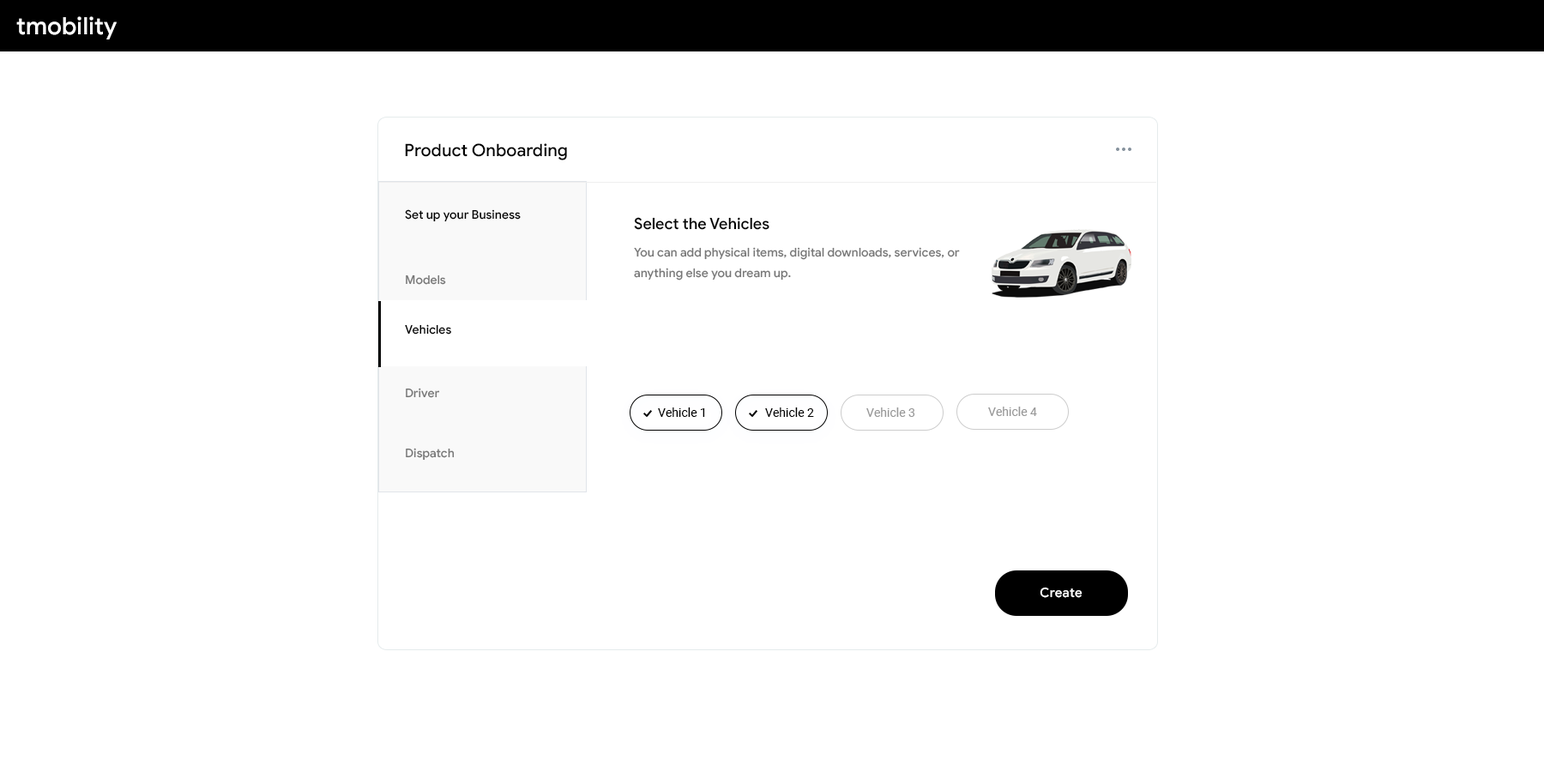
<style>
.page{position:relative;width:1544px;height:772px;background:#ffffff}
.page>*{position:absolute;margin:0}
.t1{font:24px "GoogleSans-Medium";color:#ffffff}
.t2{font:17.2px "GoogleSans-Medium";color:#000000}
.t3{font:12px "GoogleSans-Medium";color:#000000}
.t4{font:15.4px "GoogleSans-Medium";color:#000000}
.t5{font:12px/20.6px "GoogleSans-Medium";color:#777777}
.t6{font:12px "GoogleSans-Medium";color:#777777}
.t7{font:12px "Roboto-Regular";color:#000000}
.t8{font:12px "Roboto-Regular";color:#999999}
.t9{font:12.9px "GoogleSans-Medium";letter-spacing:0.01em;color:#ffffff}
</style>
<div class="page">
<p class="t1" style="left:16px;top:16px;width:101px;height:23px">tmobility</p>
<p class="t2" style="left:405px;top:143px;width:162px;height:17px">Product Onboarding</p>
<p class="t3" style="left:405px;top:209px;width:116px;height:13px">Set up your Business</p>
<p class="t4" style="left:634px;top:217px;width:136px;height:13px">Select the Vehicles</p>
<p class="t5" style="left:634px;top:247px;width:326px;height:34px">You can add physical items, digital downloads, services, or anything else you dream up.</p>
<p class="t6" style="left:406px;top:275px;width:40px;height:10px">Models</p>
<p class="t3" style="left:405px;top:324px;width:46px;height:11px">Vehicles</p>
<p class="t6" style="left:406px;top:388px;width:34px;height:10px">Driver</p>
<p class="t7" style="left:658px;top:408px;width:47px;height:9px">Vehicle 1</p>
<p class="t7" style="left:765px;top:408px;width:49px;height:9px">Vehicle 2</p>
<p class="t8" style="left:867px;top:408px;width:48px;height:9px">Vehicle 3</p>
<p class="t8" style="left:988px;top:407px;width:49px;height:9px">Vehicle 4</p>
<p class="t6" style="left:406px;top:448px;width:49px;height:13px">Dispatch</p>
<p class="t9" style="left:1040px;top:587px;width:43px;height:11px">Create</p>
</div>
